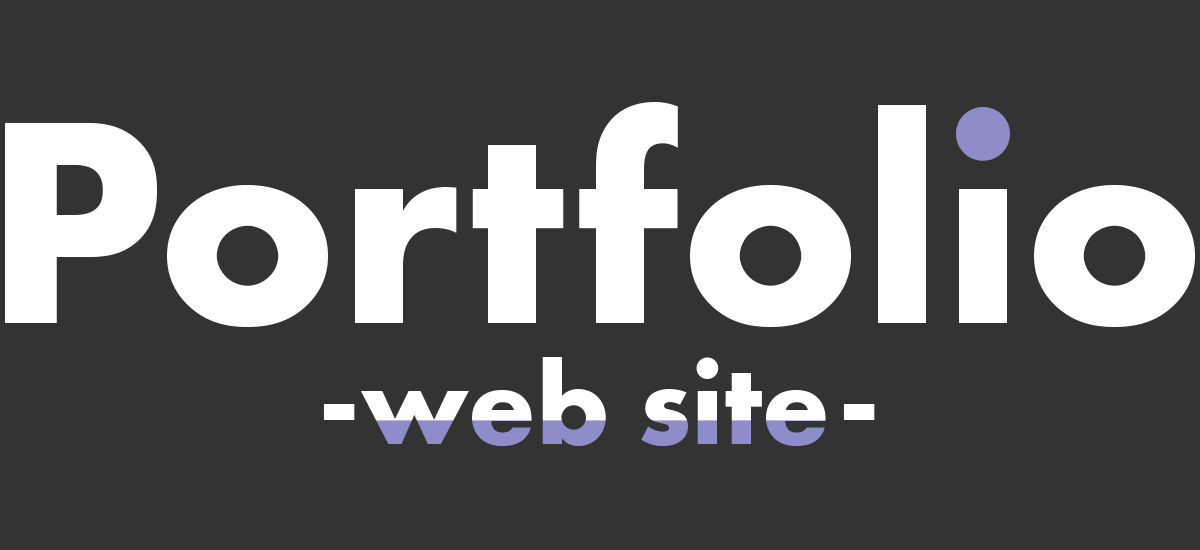
<style>
.page{position:relative;width:1200px;height:550px;background:#333333}
.page>*{position:absolute;margin:0}
.t1{font:299.1px "FuturaPT-Bold";color:#ffffff}
.t2{font:119.6px "FuturaPT-Bold";color:#ffffff}
</style>
<div class="page">
<p class="t1" style="left:5px;top:102px;width:1190px;height:225px">Portfolio</p>
<p class="t2" style="left:323px;top:357px;width:552px;height:90px">-web site-</p>
</div>
